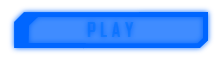
<style>
.page{position:relative;width:220px;height:60px;background:#ffffff}
.page>*{position:absolute;margin:0}
.t1{font:20px "AgencyFB-Bold";color:#1076ff}
</style>
<div class="page">
<p class="t1" style="left:87px;top:22px;width:47px;height:15px">P L A Y</p>
</div>
